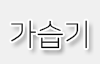
<style>
.page{position:relative;width:100px;height:64px;background:#f0f0f0}
.page>*{position:absolute;margin:0}
.t1{font:30px "NanumSquareL";color:#000000}
</style>
<div class="page">
<p class="t1" style="left:11px;top:20px;width:76px;height:29px">가습기</p>
</div>
